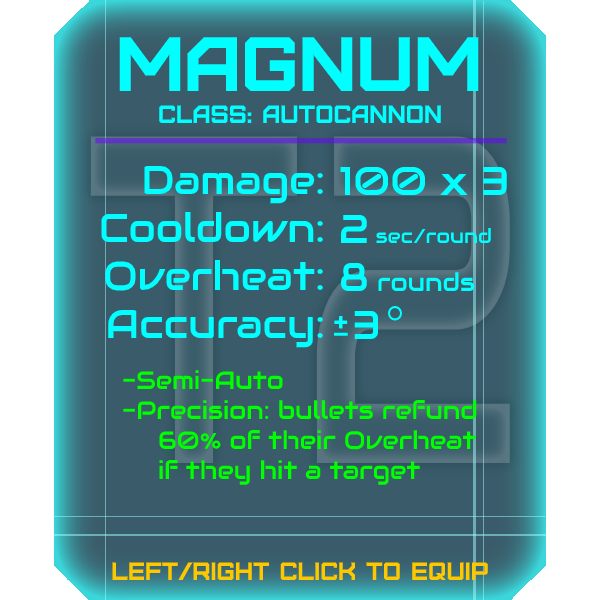
<style>
.page{position:relative;width:600px;height:600px;background:#3a5c6a}
.page>*{position:absolute;margin:0}
.t1{font:76.8px "Furore";color:#00ffff}
.t2{font:25px "Furore";color:#00ffff}
.t3{font:40px "Audiowide-Regular";color:#00ffff}
.t4{font:20px "Audiowide-Regular";color:#00ffff}
.t5{font:25px "Audiowide-Regular";color:#00ffff}
.t6{font:25px "Audiowide-Regular";color:#00ff00}
.t7{font:25px "Furore";color:#ffc700}
</style>
<div class="page">
<p class="t1" style="left:119px;top:37px;width:360px;height:54px">Magnum</p>
<p class="t2" style="left:159px;top:105px;width:282px;height:18px">Class: autocannon</p>
<p class="t3" style="left:101px;top:165px;width:222px;height:183px;text-align:right">Damage:<br>Cooldown:<br>Overheat:<br>Accuracy:</p>
<p class="t3" style="left:340px;top:166px;width:167px;height:173px">100 x 3<br>2 <span class="t4">sec/round<br></span>8 <span class="t5">rounds<br> </span>3</p>
<p class="t6" style="left:123px;top:370px;width:354px;height:115px"><span class="t3"><br><br><br><br><br></span>-Semi-Auto<br>-Precision: bullets refund<br> 60% of their Overheat<br> if they hit a target</p>
<p class="t7" style="left:112px;top:562px;width:376px;height:18px">left/right click to equip</p>
</div>
